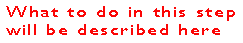
<style>
.page{position:relative;width:243px;height:43px;background:#ffffff}
.page>*{position:absolute;margin:0}
.t1{font:16px/17.8px "GillSansMT";letter-spacing:0.08em;color:#fb0606;scale:1.26 1}
</style>
<div class="page">
<p class="t1" style="left:6px;top:6px;width:229px;height:29px">What to do in this step <br>will be described here</p>
</div>
